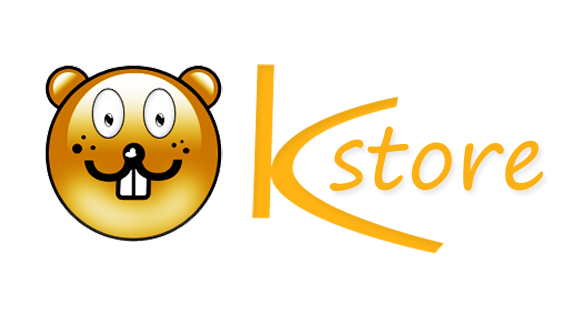
<style>
.page{position:relative;width:571px;height:313px;background:#ffffff}
.page>*{position:absolute;margin:0}
.t1{font:87px "SegoePrint";color:#fbb113}
</style>
<div class="page">
<p class="t1" style="left:329px;top:126px;width:214px;height:65px">store</p>
</div>
